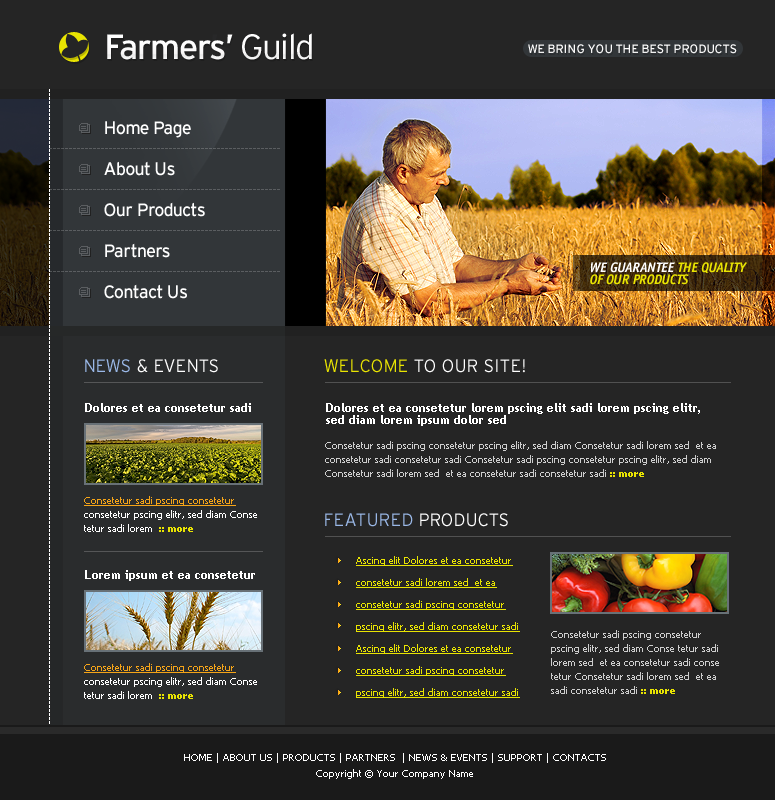
<style>
.page{position:relative;width:775px;height:800px;background:#252525}
.page>*{position:absolute;margin:0}
.t1{font:35px "Interstate-Regular";letter-spacing:-0.04em;color:#fbfbfb}
.t2{font:35px "Interstate-Light";letter-spacing:-0.04em;color:#fbfbfb}
.t3{font:12px "Interstate-Regular";color:#fbfbfb}
.t4{font:10px "Tahoma";color:#ffffff}
.t5{font:18px "Interstate-Regular";letter-spacing:-0.04em;color:#ffffff}
.t6{font:10px "Tahoma";color:#5b5e61}
.t7{font:14px/12px "OfficinaSansStd-BoldItalic";letter-spacing:-0.04em;color:#e9e402;text-transform:uppercase}
.t8{font:14px/12px "OfficinaSansStd-BoldItalic";letter-spacing:-0.04em;color:#ffffff;text-transform:uppercase}
.t9{font:18px "Interstate-Light";color:#ffffff}
.t10{font:18px "Interstate-Light";color:#9ab8e7}
.t11{font:18px "Interstate-Light";color:#e9e402}
.t12{font:12px "TrebuchetMS-Bold";color:#ffffff}
.t13{font:12px/12px "TrebuchetMS-Bold";color:#ffffff}
.t14{font:10px/14px "Tahoma";color:#cecece}
.t15{font:10px/14px "Tahoma-Bold";color:#e9e402}
.t16{font:10px/14px "Tahoma";color:#ffffff}
.t17{font:10px/14px "Tahoma";color:#f5a418;text-decoration:underline}
.t18{font:10px/22px "Tahoma";color:#e9e402;text-decoration:underline}
.t19{font:10px/16px "Tahoma";color:#ffffff}
</style>
<div class="page">
<p class="t1" style="left:107px;top:33px;width:205px;height:27px">Farmers’ <span class="t2">Guild</span></p>
<p class="t3" style="left:528px;top:44px;width:209px;height:10px">WE BRING YOU THE BEST PRODUCTS</p>
<p class="t4" style="left:49px;top:89px;width:1px;height:635px;rotate:90deg">---------------------------------------------------------------------------------------------------------------------------------------------------------------</p>
<p class="t5" style="left:105px;top:121px;width:86px;height:17px">Home Page</p>
<p class="t6" style="left:49px;top:148px;width:231px;height:1px">----------------------------------------------------------</p>
<p class="t5" style="left:104px;top:161px;width:71px;height:15px">About Us</p>
<p class="t6" style="left:49px;top:189px;width:231px;height:1px">----------------------------------------------------------</p>
<p class="t5" style="left:104px;top:202px;width:101px;height:15px">Our Products</p>
<p class="t6" style="left:49px;top:230px;width:231px;height:1px">----------------------------------------------------------</p>
<p class="t5" style="left:105px;top:243px;width:65px;height:15px">Partners</p>
<p class="t7" style="left:590px;top:262px;width:157px;height:23px"><span class="t8">we guarantee </span>the quality<br>of our products</p>
<p class="t6" style="left:49px;top:271px;width:231px;height:1px">----------------------------------------------------------</p>
<p class="t5" style="left:104px;top:284px;width:83px;height:15px">Contact Us</p>
<p class="t9" style="left:85px;top:359px;width:133px;height:14px"><span class="t10">NEWS </span>&amp; EVENTS</p>
<p class="t9" style="left:324px;top:359px;width:201px;height:14px"><span class="t11">WELCOME </span>TO OUR SITE!</p>
<p class="t12" style="left:85px;top:403px;width:166px;height:9px">Dolores et ea consetetur sadi</p>
<p class="t13" style="left:326px;top:403px;width:374px;height:23px">Dolores et ea consetetur lorem pscing elit sadi lorem pscing elitr, sed diam lorem ipsum dolor sed</p>
<p class="t14" style="left:325px;top:441px;width:391px;height:36px">Consetetur sadi pscing consetetur pscing elitr, sed diam Consetetur sadi lorem sed  et ea consetetur sadi consetetur sadi Consetetur sadi pscing consetetur pscing elitr, sed diam Consetetur sadi lorem sed  et ea consetetur sadi consetetur sadi <span class="t15">:: more</span></p>
<p class="t16" style="left:84px;top:496px;width:173px;height:36px"><span class="t17">Consetetur sadi pscing consetetur </span>consetetur pscing elitr, sed diam Conse tetur sadi lorem  <span class="t15">:: more</span></p>
<p class="t10" style="left:325px;top:513px;width:183px;height:14px">FEATURED <span class="t9">PRODUCTS</span></p>
<p class="t18" style="left:356px;top:556px;width:164px;height:142px">Ascing elit Dolores et ea consetetur consetetur sadi lorem sed  et ea consetetur sadi pscing consetetur pscing elitr, sed diam consetetur sadi<br>Ascing elit Dolores et ea consetetur consetetur sadi pscing consetetur pscing elitr, sed diam consetetur sadi</p>
<p class="t12" style="left:85px;top:570px;width:170px;height:11px">Lorem ipsum et ea consetetur</p>
<p class="t14" style="left:551px;top:630px;width:168px;height:64px">Consetetur sadi pscing consetetur pscing elitr, sed diam Conse tetur sadi lorem sed  et ea consetetur sadi conse tetur Consetetur sadi lorem sed  et ea sadi consetetur sadi <span class="t15">:: more</span></p>
<p class="t16" style="left:84px;top:663px;width:173px;height:36px"><span class="t17">Consetetur sadi pscing consetetur </span>consetetur pscing elitr, sed diam Conse tetur sadi lorem  <span class="t15">:: more</span></p>
<p class="t19" style="left:184px;top:753px;width:422px;height:26px;text-align:center">HOME | ABOUT US | PRODUCTS | PARTNERS  | NEWS &amp; EVENTS | SUPPORT | CONTACTS<br>Copyright © Your Company Name</p>
</div>
